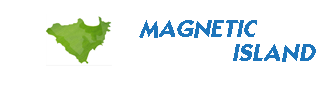
<style>
.page{position:relative;width:325px;height:95px;background:#ffffff}
.page>*{position:absolute;margin:0}
.t1{font:24px "Kaggish-Bold";letter-spacing:0.005em;color:#1d75bb;text-transform:uppercase;font-style:italic}
</style>
<div class="page">
<p class="t1" style="left:139px;top:20px;width:118px;height:18px">Magnetic</p>
<p class="t1" style="left:233px;top:44px;width:83px;height:18px">Island</p>
</div>
